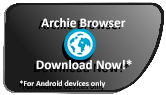
<style>
.page{position:relative;width:166px;height:95px}
.page>*{position:absolute;margin:0}
.t1{font:13.3px "Calibri-Bold";color:#ffffff}
.t2{font:8px "Calibri-Bold";color:#ffffff}
</style>
<div class="page">
<p class="t1" style="left:41px;top:18px;width:85px;height:10px">Archie Browser</p>
<p class="t1" style="left:36px;top:59px;width:96px;height:11px">Download Now!*</p>
<p class="t2" style="left:20px;top:80px;width:86px;height:8px">*For Android devices only</p>
</div>
